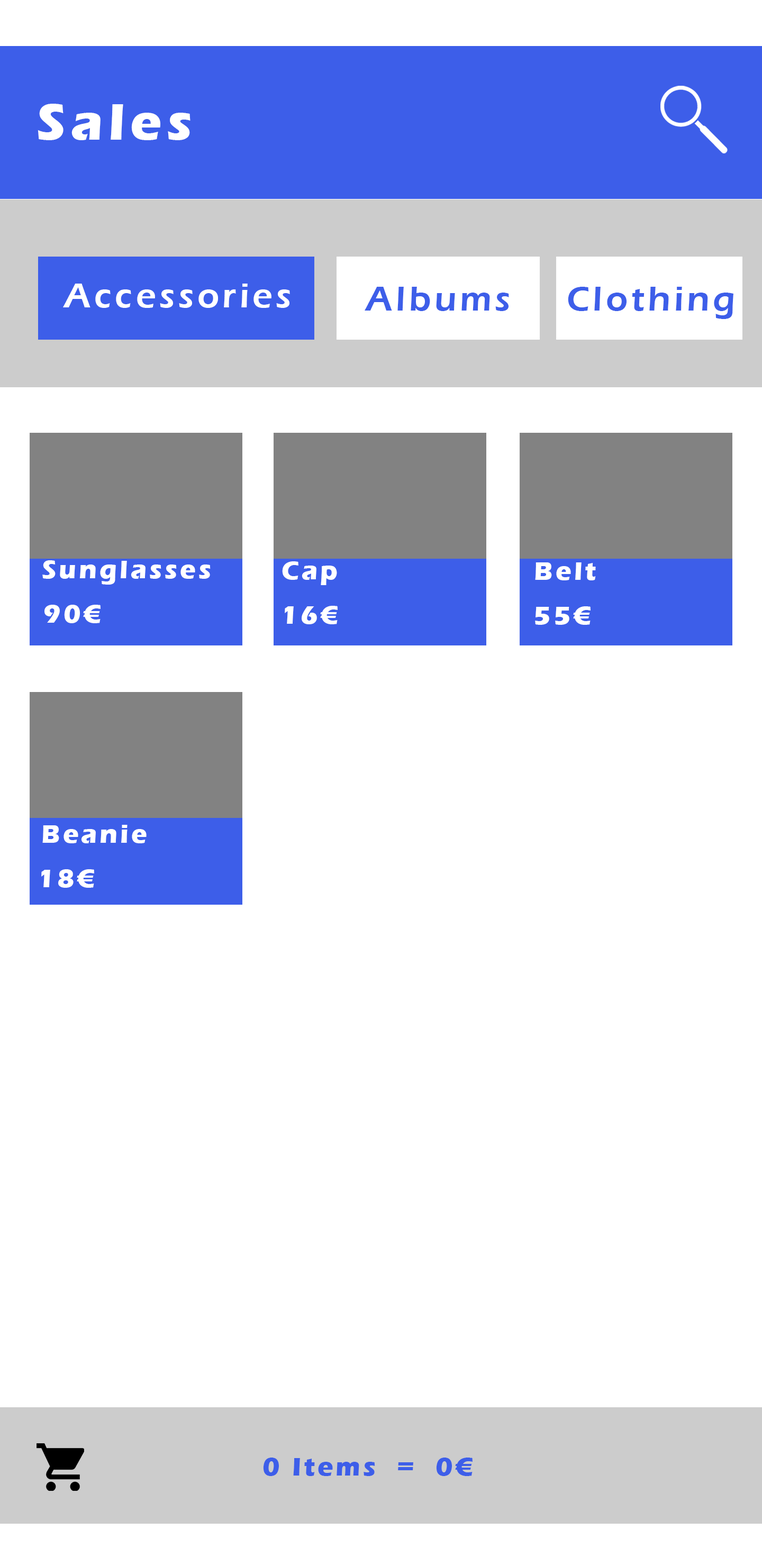
<style>
.page{position:relative;width:762px;height:1566px;background:#ffffff}
.page>*{position:absolute;margin:0}
.t1{font:52.9px "ErasITC-Bold";letter-spacing:0.1em;color:#ffffff}
.t2{font:35.3px "ErasITC-Demi";letter-spacing:0.1em;color:#ffffff}
.t3{font:35.3px "ErasITC-Demi";letter-spacing:0.1em;color:#3d5ee9}
.t4{font:26.4px "ErasITC-Bold";letter-spacing:0.1em;color:#ffffff}
.t5{font:26.4px "ErasITC-Bold";letter-spacing:0.1em;color:#3d5ee9}
</style>
<div class="page">
<p class="t1" style="left:38px;top:104px;width:152px;height:36px">Sales</p>
<p class="t2" style="left:63px;top:284px;width:227px;height:24px">Accessories</p>
<p class="t3" style="left:364px;top:287px;width:145px;height:24px">Albums</p>
<p class="t3" style="left:568px;top:287px;width:165px;height:32px">Clothing</p>
<p class="t4" style="left:42px;top:560px;width:169px;height:24px">Sunglasses</p>
<p class="t4" style="left:282px;top:561px;width:55px;height:24px">Cap</p>
<p class="t4" style="left:535px;top:562px;width:61px;height:18px">Belt</p>
<p class="t4" style="left:44px;top:605px;width:56px;height:18px">90€</p>
<p class="t4" style="left:285px;top:606px;width:52px;height:18px">16€</p>
<p class="t4" style="left:535px;top:606px;width:55px;height:19px">55€</p>
<p class="t4" style="left:42px;top:825px;width:105px;height:18px">Beanie</p>
<p class="t4" style="left:41px;top:869px;width:53px;height:19px">18€</p>
<p class="t5" style="left:263px;top:1457px;width:209px;height:19px">0 Items  =  0€</p>
</div>
